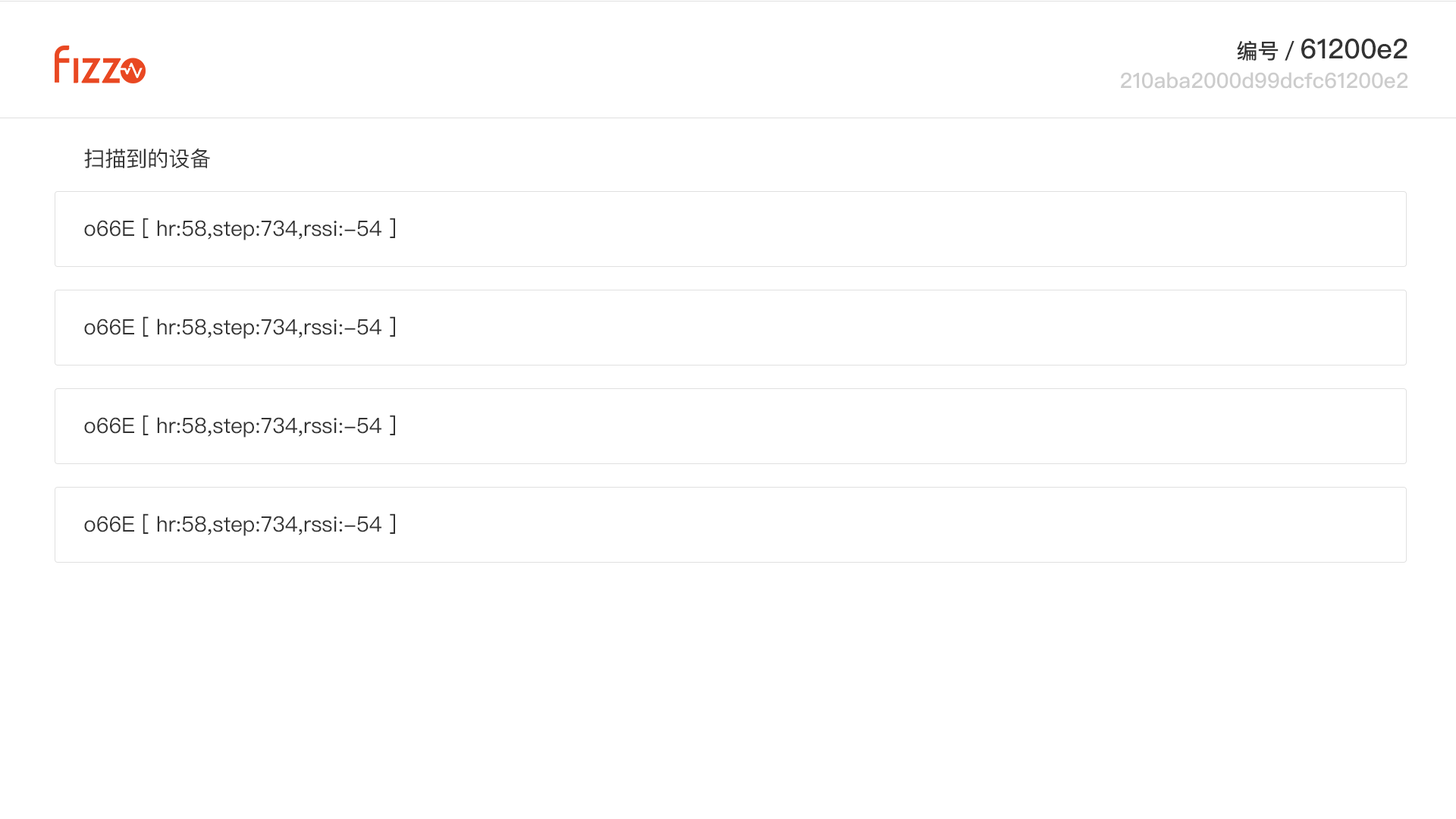
<style>
.page{position:relative;width:1456px;height:819px;background:#ffffff}
.page>*{position:absolute;margin:0}
.t1{font:27.3px "PingFangSC-Medium";color:#333333}
.t2{font:21.2px "PingFangSC-Medium";color:#333333}
.t3{font:21.2px "PingFangSC-Medium";color:#cccccc}
.t4{font:21.2px "PingFangSC-Regular";color:#333333}
</style>
<div class="page">
<p class="t1" style="left:1237px;top:38px;width:170px;height:23px"><span class="t2">编号／</span>61200e2</p>
<p class="t3" style="left:1121px;top:72px;width:286px;height:17px">210aba2000d99dcfc61200e2</p>
<p class="t4" style="left:84px;top:148px;width:126px;height:20px">扫描到的设备</p>
<p class="t4" style="left:84px;top:218px;width:311px;height:22px">o66E [ hr:58,step:734,rssi:-54 ]</p>
<p class="t4" style="left:84px;top:316px;width:311px;height:23px">o66E [ hr:58,step:734,rssi:-54 ]</p>
<p class="t4" style="left:84px;top:415px;width:311px;height:23px">o66E [ hr:58,step:734,rssi:-54 ]</p>
<p class="t4" style="left:84px;top:513px;width:311px;height:23px">o66E [ hr:58,step:734,rssi:-54 ]</p>
</div>
